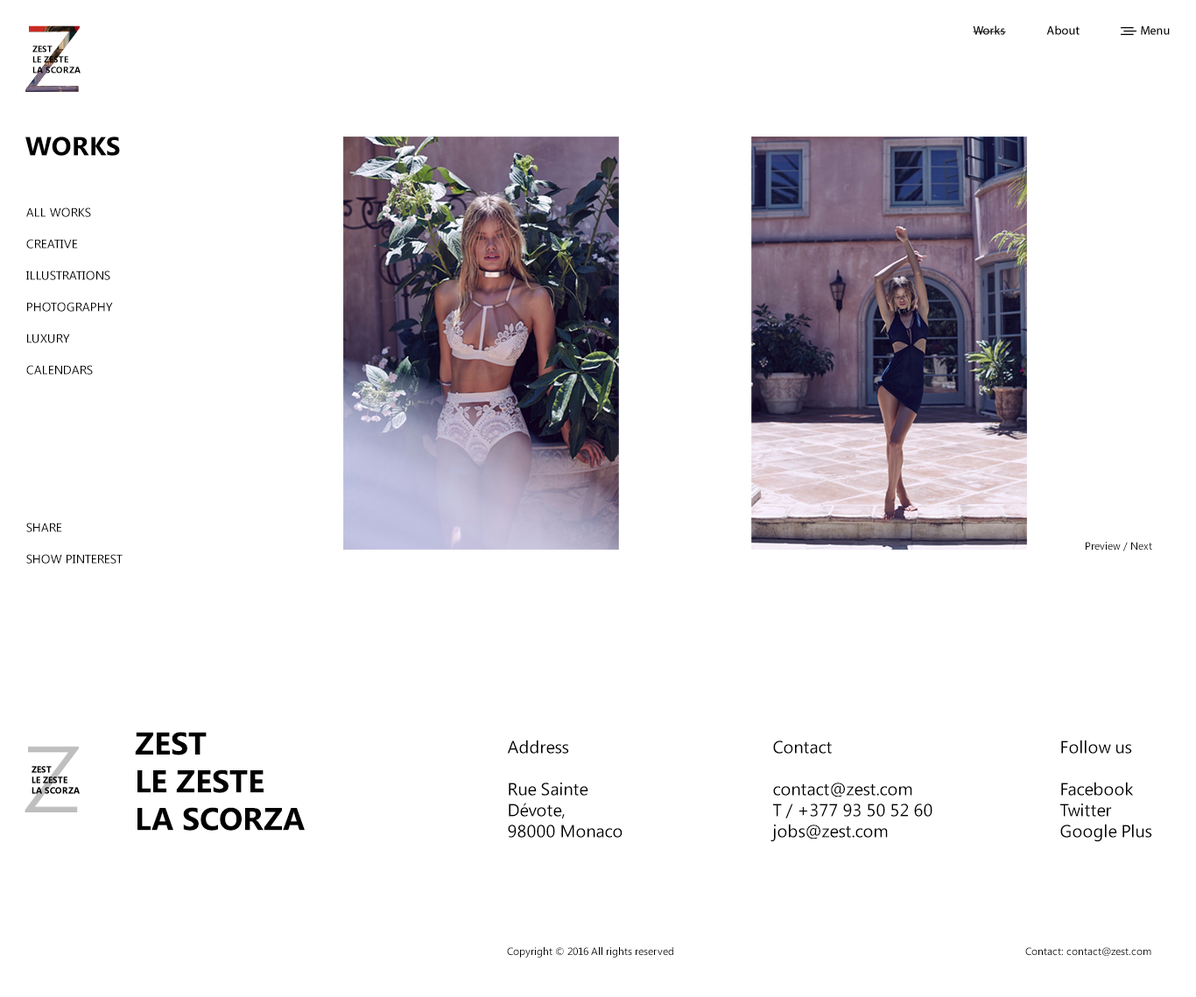
<style>
.page{position:relative;width:1196px;height:997px;background:#ffffff}
.page>*{position:absolute;margin:0}
.t1{font:12.3px "MyriadPro-Regular";color:#000000}
.t2{font:8.8px "SegoeUI-Bold";color:#000000;text-transform:uppercase}
.t3{font:26.3px "SegoeUI-Bold";color:#000000}
.t4{font:12.3px/31.5px "SegoeUI";color:#000000;text-transform:uppercase}
.t5{font:10.5px "SegoeUI";color:#000000}
.t6{font:31.5px "SegoeUI-Bold";color:#000000;text-transform:uppercase}
.t7{font:17.5px "SegoeUI";color:#000000}
</style>
<div class="page">
<p class="t1" style="left:973px;top:25px;width:33px;height:10px">Works</p>
<p class="t1" style="left:1046px;top:25px;width:33px;height:10px">About</p>
<p class="t1" style="left:1141px;top:26px;width:29px;height:9px">Menu</p>
<p class="t2" style="left:32px;top:46px;width:49px;height:28px">zest<br>le zeste<br>la scorza</p>
<p class="t3" style="left:25px;top:137px;width:95px;height:19px">WORKS</p>
<p class="t4" style="left:26px;top:207px;width:97px;height:357px">All Works<br>Creative<br>Illustrations<br>Photography<br>Luxury<br>Calendars<br><br><br><br><br>Share<br>SHOW PINTEReST</p>
<p class="t5" style="left:1086px;top:542px;width:66px;height:10px">Preview / Next</p>
<p class="t6" style="left:135px;top:732px;width:170px;height:99px">zest<br>le zeste<br>la scorza</p>
<p class="t7" style="left:507px;top:740px;width:115px;height:98px">Address<br><br>Rue Sainte<br>Dévote,<br>98000 Monaco</p>
<p class="t7" style="left:770px;top:741px;width:162px;height:101px">Contact<br><br>contact@zest.com<br>T / +377 93 50 52 60<br>jobs@zest.com</p>
<p class="t7" style="left:1060px;top:740px;width:92px;height:102px">Follow us<br><br>Facebook<br>Twitter<br>Google Plus</p>
<p class="t5" style="left:507px;top:947px;width:166px;height:11px">Copyright © 2016 All rights reserved</p>
<p class="t5" style="left:1025px;top:947px;width:126px;height:9px">Contact: contact@zest.com</p>
</div>
